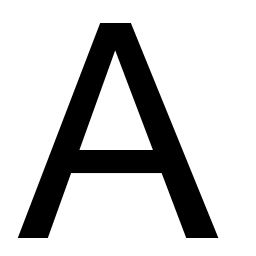
<style>
.page{position:relative;width:256px;height:256px;background:#ffffff}
.page>*{position:absolute;margin:0}
.t1{font:300px "MicrosoftSansSerif";letter-spacing:-0.14em;color:#000000}
</style>
<div class="page">
<p class="t1" style="left:17px;top:23px;width:202px;height:215px">A</p>
</div>
